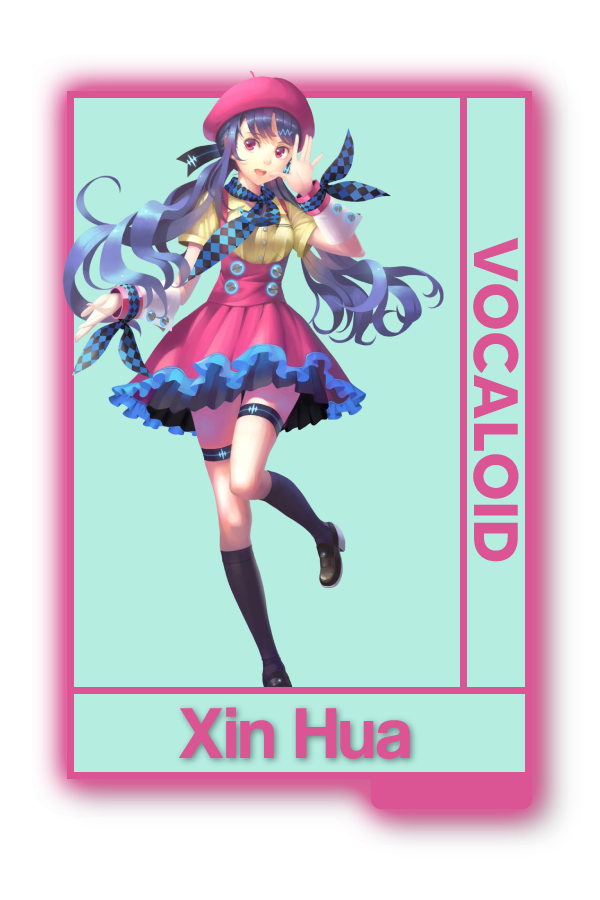
<style>
.page{position:relative;width:600px;height:900px;background:#b5ede1}
.page>*{position:absolute;margin:0}
.t1{font:62.5px "MADETOMMY-Bold";color:#db5493}
.t2{font:75px "CoolveticaRg-Regular";color:#db5493}
</style>
<div class="page">
<p class="t1" style="left:473px;top:237px;width:46px;height:325px;rotate:90deg">VOCALOID</p>
<p class="t2" style="left:178px;top:707px;width:232px;height:52px">Xin Hua</p>
</div>
